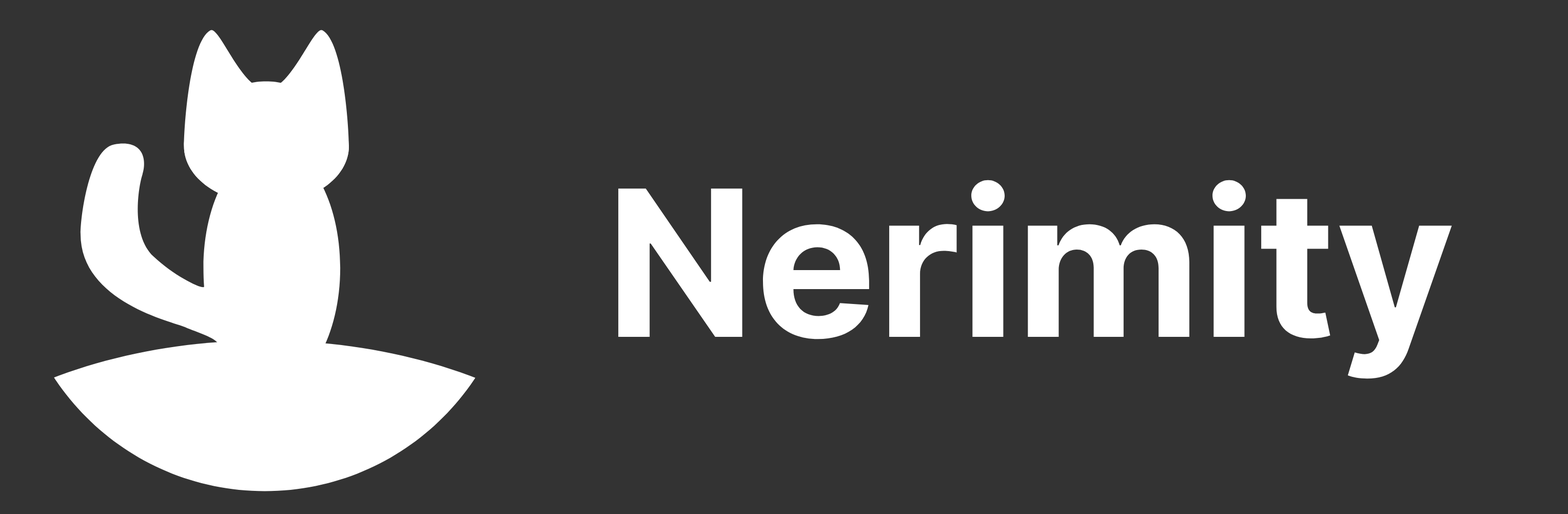
<style>
.page{position:relative;width:1568px;height:514px;background:#333333}
.page>*{position:absolute;margin:0}
.t1{font:203.7px "Inter-Bold";color:#ffffff}
</style>
<div class="page">
<p class="t1" style="left:618px;top:180px;width:834px;height:199px">Nerimity</p>
</div>
